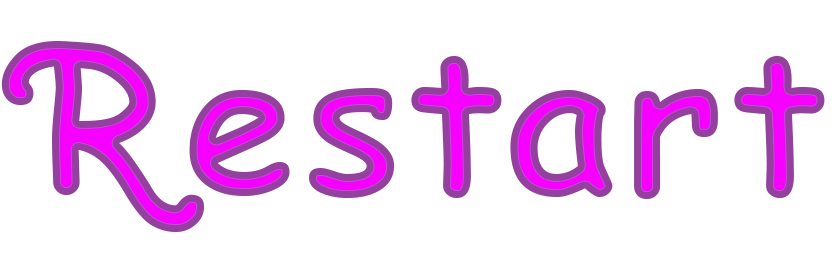
<style>
.page{position:relative;width:838px;height:273px;background:#ffffff}
.page>*{position:absolute;margin:0}
.t1{font:200px "ComicSansMS-Bold";letter-spacing:0.057em}
</style>
<div class="page">
<p class="t1" style="left:1px;top:41px;width:824px;height:191px">Restart</p>
</div>
